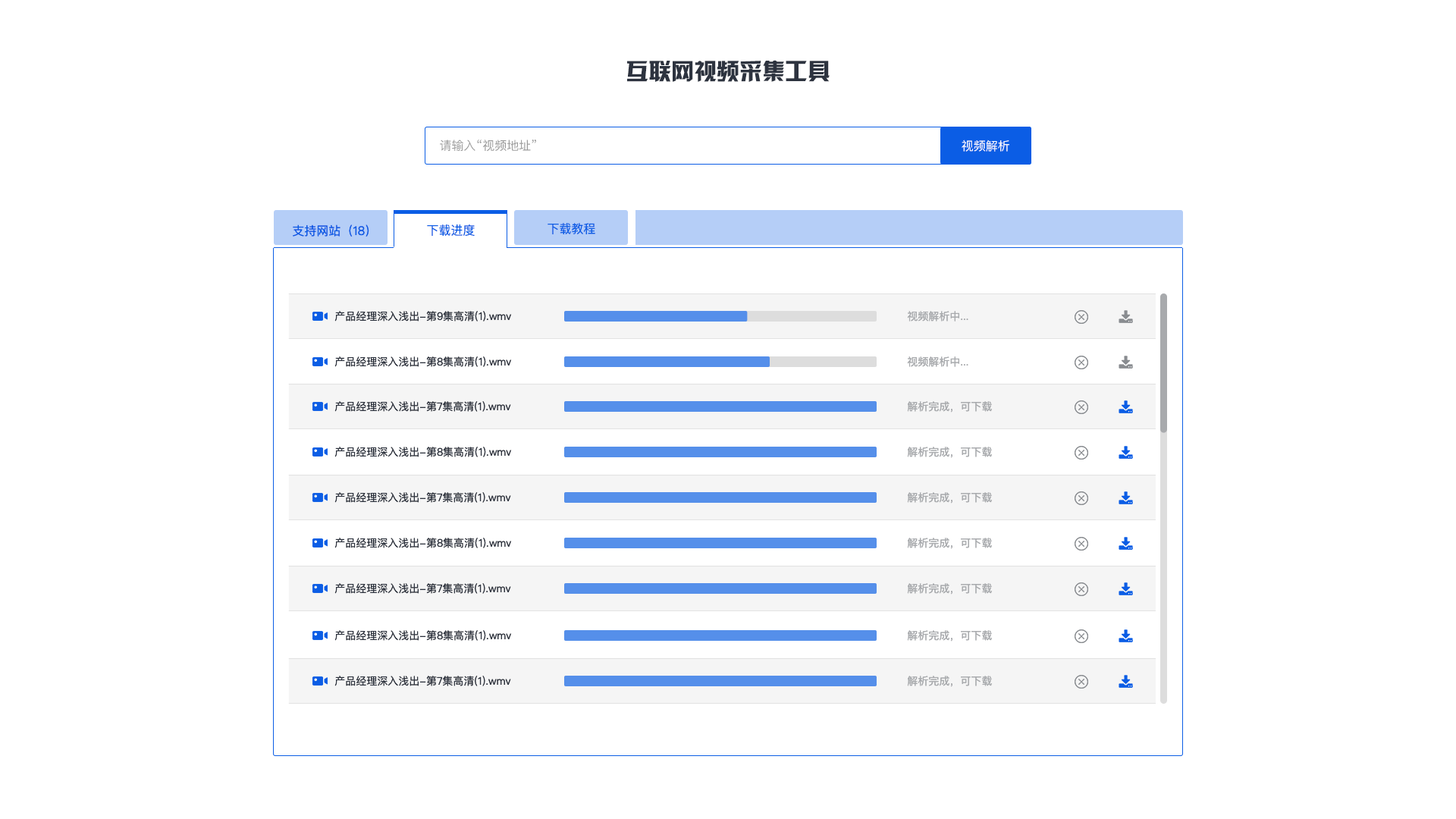
<style>
.page{position:relative;width:1456px;height:819px;background:#ffffff}
.page>*{position:absolute;margin:0}
.t1{font:22.7px "HYk2gj";color:#2d333f}
.t2{font:12.1px "PingFangSC-Regular";color:#999999}
.t3{font:12.1px "PingFangSC-Regular";color:#ffffff}
.t4{font:12.1px "PingFangSC-Regular";color:#0b5de5}
.t5{font:10.6px "PingFangSC-Regular";color:#2d333f}
.t6{font:10.6px "PingFangSC-Regular";color:#a8aaad}
</style>
<div class="page">
<p class="t1" style="left:627px;top:60px;width:203px;height:22px">互联网视频采集工具</p>
<p class="t2" style="left:440px;top:140px;width:96px;height:12px">请输入“视频地址”</p>
<p class="t3" style="left:962px;top:140px;width:47px;height:12px">视频解析</p>
<p class="t4" style="left:293px;top:224px;width:76px;height:13px">支持网站（18）</p>
<p class="t4" style="left:427px;top:224px;width:48px;height:12px">下载进度</p>
<p class="t4" style="left:548px;top:223px;width:47px;height:11px">下载教程</p>
<p class="t5" style="left:334px;top:311px;width:178px;height:11px">产品经理深入浅出-第9集高清(1).wmv</p>
<p class="t6" style="left:907px;top:311px;width:61px;height:11px">视频解析中...</p>
<p class="t5" style="left:334px;top:356px;width:178px;height:11px">产品经理深入浅出-第8集高清(1).wmv</p>
<p class="t6" style="left:907px;top:356px;width:61px;height:11px">视频解析中...</p>
<p class="t5" style="left:334px;top:401px;width:177px;height:11px">产品经理深入浅出-第7集高清(1).wmv</p>
<p class="t6" style="left:907px;top:401px;width:85px;height:12px">解析完成，可下载</p>
<p class="t5" style="left:334px;top:447px;width:178px;height:10px">产品经理深入浅出-第8集高清(1).wmv</p>
<p class="t6" style="left:907px;top:447px;width:85px;height:11px">解析完成，可下载</p>
<p class="t5" style="left:334px;top:492px;width:177px;height:11px">产品经理深入浅出-第7集高清(1).wmv</p>
<p class="t6" style="left:907px;top:492px;width:85px;height:12px">解析完成，可下载</p>
<p class="t5" style="left:334px;top:538px;width:178px;height:10px">产品经理深入浅出-第8集高清(1).wmv</p>
<p class="t6" style="left:907px;top:538px;width:85px;height:11px">解析完成，可下载</p>
<p class="t5" style="left:334px;top:583px;width:177px;height:11px">产品经理深入浅出-第7集高清(1).wmv</p>
<p class="t6" style="left:907px;top:583px;width:85px;height:12px">解析完成，可下载</p>
<p class="t5" style="left:334px;top:630px;width:178px;height:11px">产品经理深入浅出-第8集高清(1).wmv</p>
<p class="t6" style="left:907px;top:630px;width:85px;height:12px">解析完成，可下载</p>
<p class="t5" style="left:334px;top:676px;width:177px;height:10px">产品经理深入浅出-第7集高清(1).wmv</p>
<p class="t6" style="left:907px;top:676px;width:85px;height:11px">解析完成，可下载</p>
</div>
